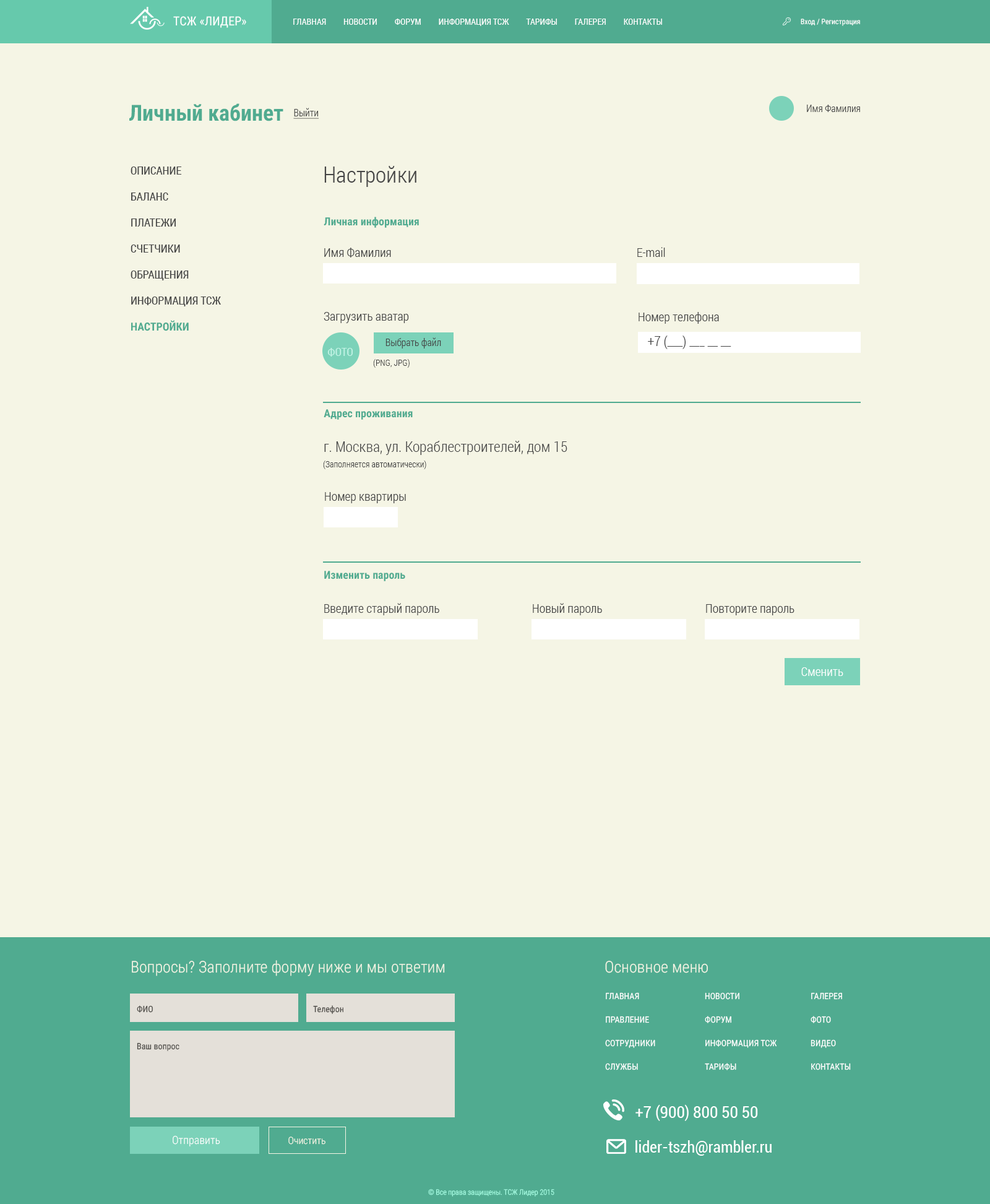
<style>
.page{position:relative;width:990px;height:1204px;background:#f5f5e5}
.page>*{position:absolute;margin:0}
.t1{font:12.4px "RobotoCondensed-Regular";letter-spacing:0.005em;color:#ffffff}
.t2{font:8.7px "RobotoCondensed-Regular";letter-spacing:0.005em;color:#ffffff}
.t3{font:7.4px "RobotoCondensed-Regular";color:#ffffff}
.t4{font:22.3px "RobotoCondensed-Bold";color:#50ab90}
.t5{font:9.9px "RobotoCondensed-Light";color:#454545;text-decoration:underline}
.t6{font:9.9px "RobotoCondensed-Light";color:#454545}
.t7{font:11.1px/26px "RobotoCondensed-Regular";color:#454545}
.t8{font:11.1px/26px "RobotoCondensed-Bold";color:#50ab90}
.t9{font:22.3px "RobotoCondensed-Light";color:#454545}
.t10{font:11.1px "RobotoCondensed-Bold";color:#50ab90}
.t11{font:12.4px "RobotoCondensed-Light";color:#454545}
.t12{font:13.6px "RobotoCondensed-Light";letter-spacing:0.005em;color:#454545}
.t13{font:11.1px "RobotoCondensed-Regular";letter-spacing:0.005em;color:#c2f3e5}
.t14{font:8.7px "RobotoCondensed-Light";letter-spacing:0.005em;color:#454545}
.t15{font:14.9px "RobotoCondensed-Light";color:#454545}
.t16{font:12.4px "RobotoCondensed-Light";letter-spacing:0.005em;color:#ffffff}
.t17{font:16.1px "RobotoCondensed-Light";color:#f5f5e5}
.t18{font:8.7px/23.5px "RobotoCondensed-Regular";color:#ffffff}
.t19{font:8.7px "RobotoCondensed-Regular";color:#4c4a46}
.t20{font:16.1px "Roboto-Condensed";color:#ffffff}
.t21{font:11.1px "RobotoCondensed-Light";color:#ffffff}
.t22{font:9.9px "RobotoCondensed-Light";color:#f5f5e5}
.t23{font:7.4px "RobotoCondensed-Light";color:#a6fde3}
</style>
<div class="page">
<p class="t1" style="left:173px;top:16px;width:73px;height:12px">ТСЖ «ЛИДЕР»</p>
<p class="t2" style="left:293px;top:19px;width:369px;height:7px">ГЛАВНАЯ         НОВОСТИ         ФОРУМ         ИНФОРМАЦИЯ ТСЖ         ТАРИФЫ         ГАЛЕРЕЯ         КОНТАКТЫ</p>
<p class="t3" style="left:801px;top:19px;width:59px;height:7px">Вход / Регистрация</p>
<p class="t4" style="left:129px;top:103px;width:155px;height:18px">Личный кабинет</p>
<p class="t5" style="left:293px;top:108px;width:26px;height:11px">Выйти</p>
<p class="t6" style="left:807px;top:105px;width:53px;height:7px">Имя Фамилия</p>
<p class="t7" style="left:131px;top:167px;width:90px;height:164px">ОПИСАНИЕ<br>БАЛАНС<br>ПЛАТЕЖИ<br>СЧЕТЧИКИ<br>ОБРАЩЕНИЯ<br>ИНФОРМАЦИЯ ТСЖ<br><span class="t8">НАСТРОЙКИ</span></p>
<p class="t9" style="left:324px;top:166px;width:93px;height:21px">Настройки</p>
<p class="t10" style="left:324px;top:217px;width:95px;height:11px">Личная информация</p>
<p class="t11" style="left:324px;top:248px;width:67px;height:10px">Имя Фамилия</p>
<p class="t11" style="left:638px;top:247px;width:27px;height:10px">E-mail</p>
<p class="t11" style="left:324px;top:312px;width:85px;height:11px">Загрузить аватар</p>
<p class="t11" style="left:639px;top:312px;width:80px;height:12px">Номер телефона</p>
<p class="t6" style="left:386px;top:337px;width:55px;height:12px">Выбрать файл</p>
<p class="t12" style="left:648px;top:336px;width:84px;height:13px">+7 (___) ___ __ __</p>
<p class="t13" style="left:327px;top:348px;width:26px;height:9px">ФОТО</p>
<p class="t14" style="left:373px;top:359px;width:37px;height:9px">(PNG, JPG)</p>
<p class="t10" style="left:324px;top:409px;width:89px;height:11px">Адрес проживания</p>
<p class="t15" style="left:324px;top:441px;width:244px;height:14px">г. Москва, ул. Кораблестроителей, дом 15</p>
<p class="t14" style="left:323px;top:461px;width:103px;height:8px">(Заполняется автоматически)</p>
<p class="t11" style="left:325px;top:492px;width:81px;height:11px">Номер квартиры</p>
<p class="t10" style="left:324px;top:571px;width:81px;height:10px">Изменить пароль</p>
<p class="t11" style="left:324px;top:603px;width:115px;height:12px">Введите старый пароль</p>
<p class="t11" style="left:533px;top:603px;width:69px;height:12px">Новый пароль</p>
<p class="t11" style="left:706px;top:604px;width:89px;height:11px">Повторите пароль</p>
<p class="t16" style="left:802px;top:667px;width:42px;height:9px">Сменить</p>
<p class="t17" style="left:132px;top:960px;width:313px;height:16px">Вопросы? Заполните форму ниже и мы ответим</p>
<p class="t17" style="left:605px;top:961px;width:103px;height:12px">Основное меню</p>
<p class="t18" style="left:605px;top:992px;width:51px;height:78px">ГЛАВНАЯ<br>ПРАВЛЕНИЕ<br>СОТРУДНИКИ<br>СЛУЖБЫ</p>
<p class="t18" style="left:705px;top:992px;width:72px;height:78px">НОВОСТИ<br>ФОРУМ<br>ИНФОРМАЦИЯ ТСЖ<br>ТАРИФЫ</p>
<p class="t18" style="left:811px;top:992px;width:40px;height:78px">ГАЛЕРЕЯ<br>ФОТО<br>ВИДЕО<br>КОНТАКТЫ</p>
<p class="t19" style="left:137px;top:1005px;width:16px;height:8px">ФИО</p>
<p class="t19" style="left:313px;top:1005px;width:31px;height:9px">Телефон</p>
<p class="t19" style="left:137px;top:1042px;width:43px;height:9px">Ваш вопрос</p>
<p class="t20" style="left:636px;top:1104px;width:122px;height:17px">+7 (900) 800 50 50</p>
<p class="t21" style="left:173px;top:1135px;width:47px;height:11px">Отправить</p>
<p class="t22" style="left:288px;top:1137px;width:38px;height:8px">Очистить</p>
<p class="t20" style="left:636px;top:1140px;width:136px;height:16px">lider-tszh@rambler.ru</p>
<p class="t23" style="left:428px;top:1189px;width:127px;height:8px">© Все права защищены. ТСЖ Лидер 2015</p>
</div>
